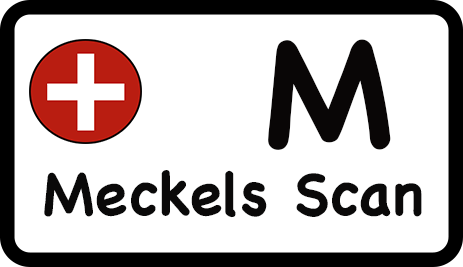
<style>
.page{position:relative;width:463px;height:267px;background:#ffffff}
.page>*{position:absolute;margin:0}
.t1{font:150px "Chalkboard-Bold";color:#090606}
.t2{font:60px "Chalkboard-Bold";color:#0a0909}
</style>
<div class="page">
<p class="t1" style="left:268px;top:39px;width:123px;height:111px">M</p>
<p class="t2" style="left:44px;top:170px;width:378px;height:48px">Meckels Scan</p>
</div>
